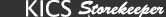
<style>
.page{position:relative;width:166px;height:17px;background:#333333}
.page>*{position:absolute;margin:0}
.t1{font:19px "BrushScriptStd";color:#ffffff}
</style>
<div class="page">
<p class="t1" style="left:78px;top:0px;width:87px;height:18px">Storekeeper</p>
</div>
